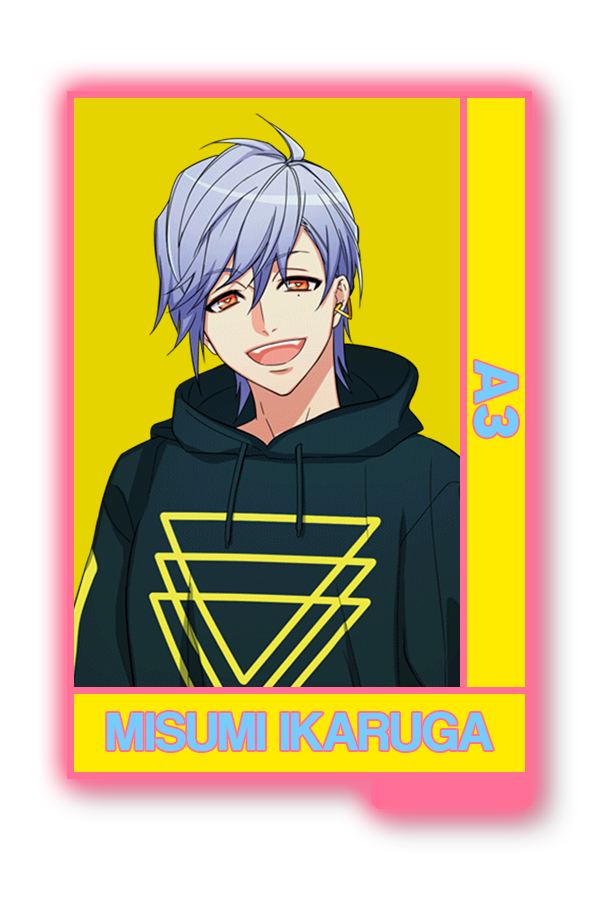
<style>
.page{position:relative;width:600px;height:900px;background:#ffffff}
.page>*{position:absolute;margin:0}
.t1{font:60.5px "MADETOMMY-Bold";color:#74ccff}
.t2{font:54.9px "CoolveticaRg-Regular";color:#74ccff}
</style>
<div class="page">
<p class="t1" style="left:474px;top:360px;width:44px;height:78px;rotate:90deg">A3</p>
<p class="t2" style="left:107px;top:712px;width:386px;height:39px">MISUMI IKARUGA</p>
</div>
